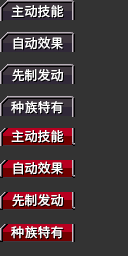
<style>
.page{position:relative;width:128px;height:256px;background:#333333}
.page>*{position:absolute;margin:0}
.t1{font:13px/32px "SourceHanSansSC-Regular";color:#ffffff}
.t2{font:13px/30px "SourceHanSansSC-Regular";color:#ffffff}
</style>
<div class="page">
<p class="t1" style="left:11px;top:5px;width:53px;height:109px">主动技能<br>自动效果<br>先制发动<br><span class="t2">种族特有</span></p>
<p class="t1" style="left:11px;top:130px;width:53px;height:109px">主动技能<br>自动效果<br>先制发动<br><span class="t2">种族特有</span></p>
</div>
